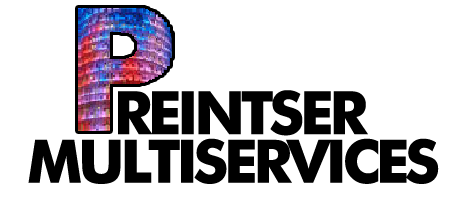
<style>
.page{position:relative;width:465px;height:200px;background:#ffffff}
.page>*{position:absolute;margin:0}
.t1{font:60px/42px "Futura-Bold";letter-spacing:-0.075em;color:#000000}
</style>
<div class="page">
<p class="t1" style="left:28px;top:90px;width:411px;height:94px;text-align:center">REINTSER <br>MULTISERVICES</p>
</div>
